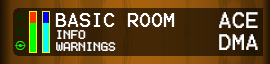
<style>
.page{position:relative;width:270px;height:64px}
.page>*{position:absolute;margin:0}
.t1{font:10px "Terminal";color:#ffffff}
.t2{font:16px "Terminal";color:#ffffff}
.t3{font:18px "Terminal";color:#ffffff}
</style>
<div class="page">
<p class="t1" style="left:55px;top:13px;width:120px;height:38px"><span class="t2">BASIC ROOM<br></span>INFO<br>WARNINGS</p>
<p class="t3" style="left:219px;top:12px;width:39px;height:38px">ACE<br>DMA</p>
</div>
